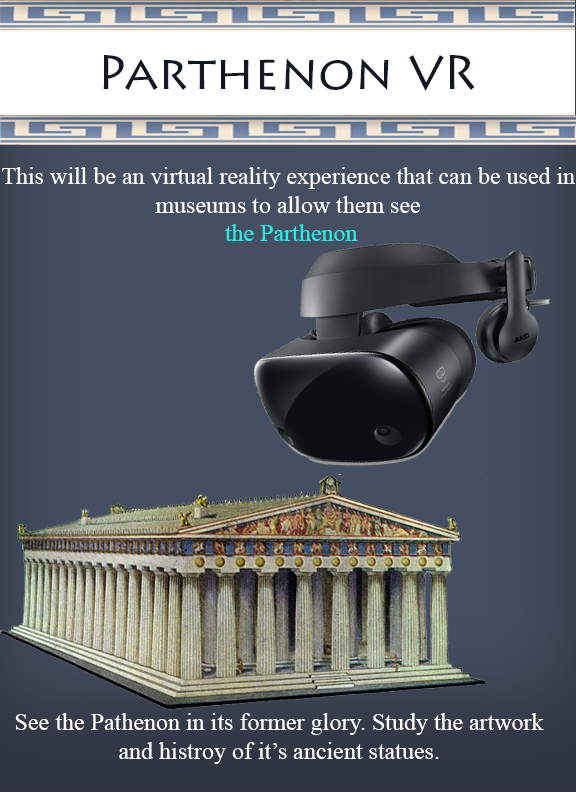
<style>
.page{position:relative;width:576px;height:792px;background:#464e61}
.page>*{position:absolute;margin:0}
.t1{font:48px "LithosPro-Regular";color:#131721}
.t2{font:24px "TimesNewRomanPSMT";color:#fefefe}
.t3{font:24px "TimesNewRomanPSMT";color:#1ef3e6}
.t4{font:24px "TimesNewRomanPSMT";color:#ffffff}
</style>
<div class="page">
<p class="t1" style="left:103px;top:55px;width:372px;height:36px">Parthenon VR</p>
<p class="t2" style="left:2px;top:167px;width:573px;height:74px;text-align:center">This will be an virtual reality experience that can be used in <br>museums to allow them see <br><span class="t3">the Parthenon</span></p>
<p class="t4" style="left:15px;top:713px;width:529px;height:51px;text-align:center">See the Pathenon in its former glory. Study the artwork<br>and histroy of it’s ancient statues.</p>
</div>
